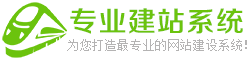
<style>
.page{position:relative;width:250px;height:60px;background:#ffffff}
.page>*{position:absolute;margin:0}
.t1{font:28px "FZZZHONGJW--GB1-0";letter-spacing:0.05em;color:#6bc30d}
.t2{font:12px "NSimSun";letter-spacing:0.05em;color:#b4b3b3}
</style>
<div class="page">
<p class="t1" style="left:70px;top:8px;width:173px;height:26px">专业建站系统</p>
<p class="t2" style="left:67px;top:39px;width:180px;height:12px">为您打造最专业的网站建设系统！</p>
</div>
